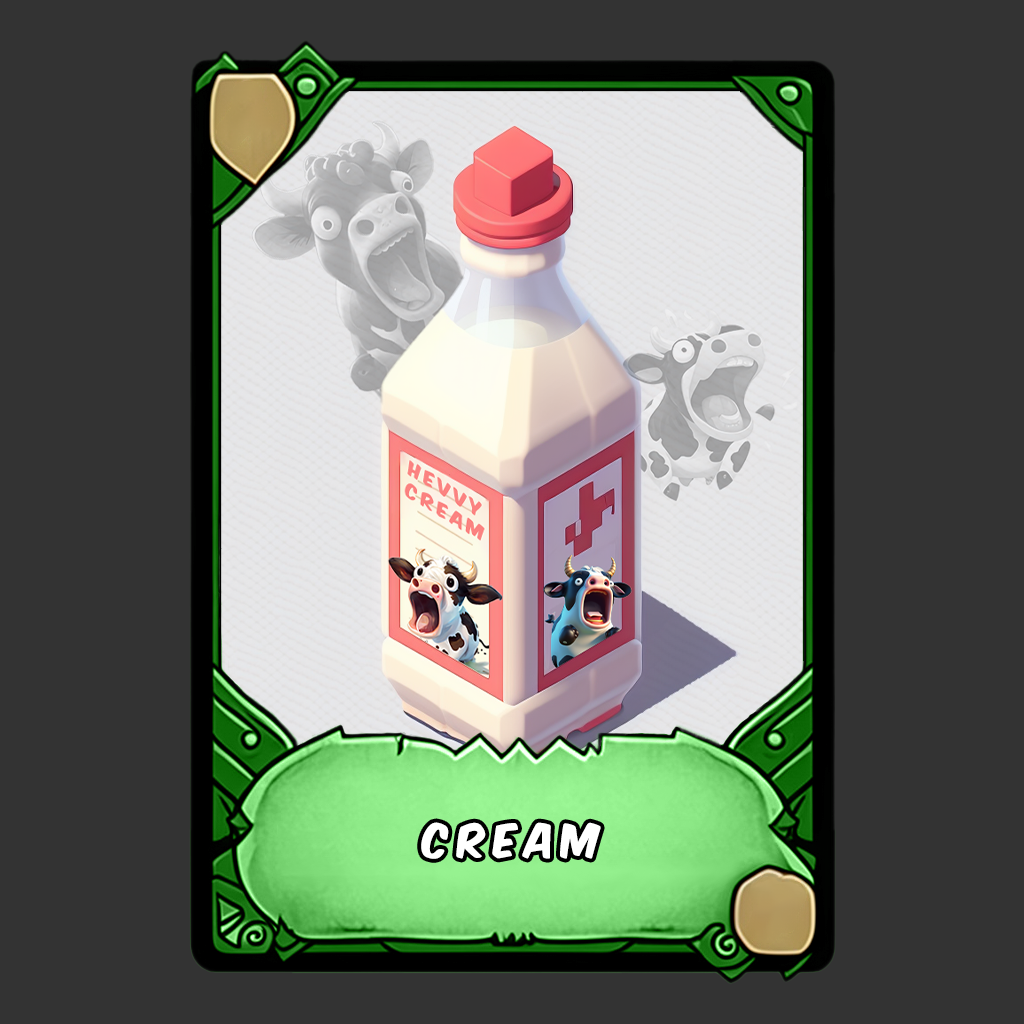
<style>
.page{position:relative;width:1024px;height:1024px;background:#333333}
.page>*{position:absolute;margin:0}
.t1{font:40px "KomikaAxis";letter-spacing:0.2em;color:#ffffff}
</style>
<div class="page">
<p class="t1" style="left:421px;top:822px;width:180px;height:37px">CREAM</p>
</div>
